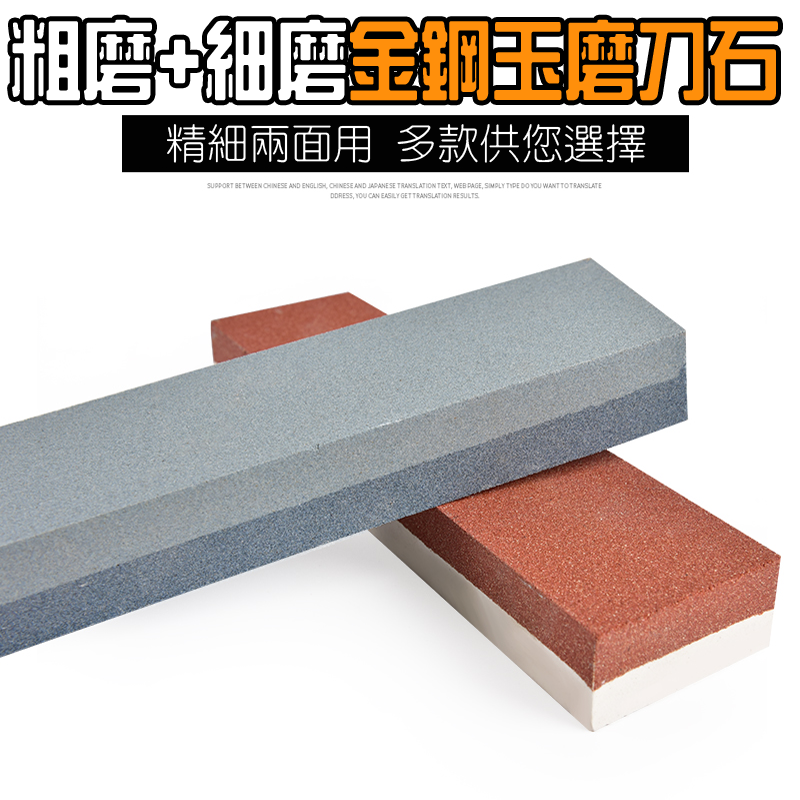
<style>
.page{position:relative;width:800px;height:800px;background:#ffffff}
.page>*{position:absolute;margin:0}
.t1{font:85.5px "HanWangZonYi";color:#ff8f0b;scale:0.84 1}
.t2{font:85.5px "HanWangZonYi";color:#ffffff;scale:0.84 1}
.t3{font:41.9px "HanWangYenLight";color:#ffffff}
</style>
<div class="page">
<p class="t1" style="left:12px;top:19px;width:766px;height:82px"><span class="t2">粗磨+細磨</span>金鋼玉磨刀石</p>
<p class="t3" style="left:167px;top:124px;width:479px;height:39px">精細兩面用 多款供您選擇</p>
</div>
